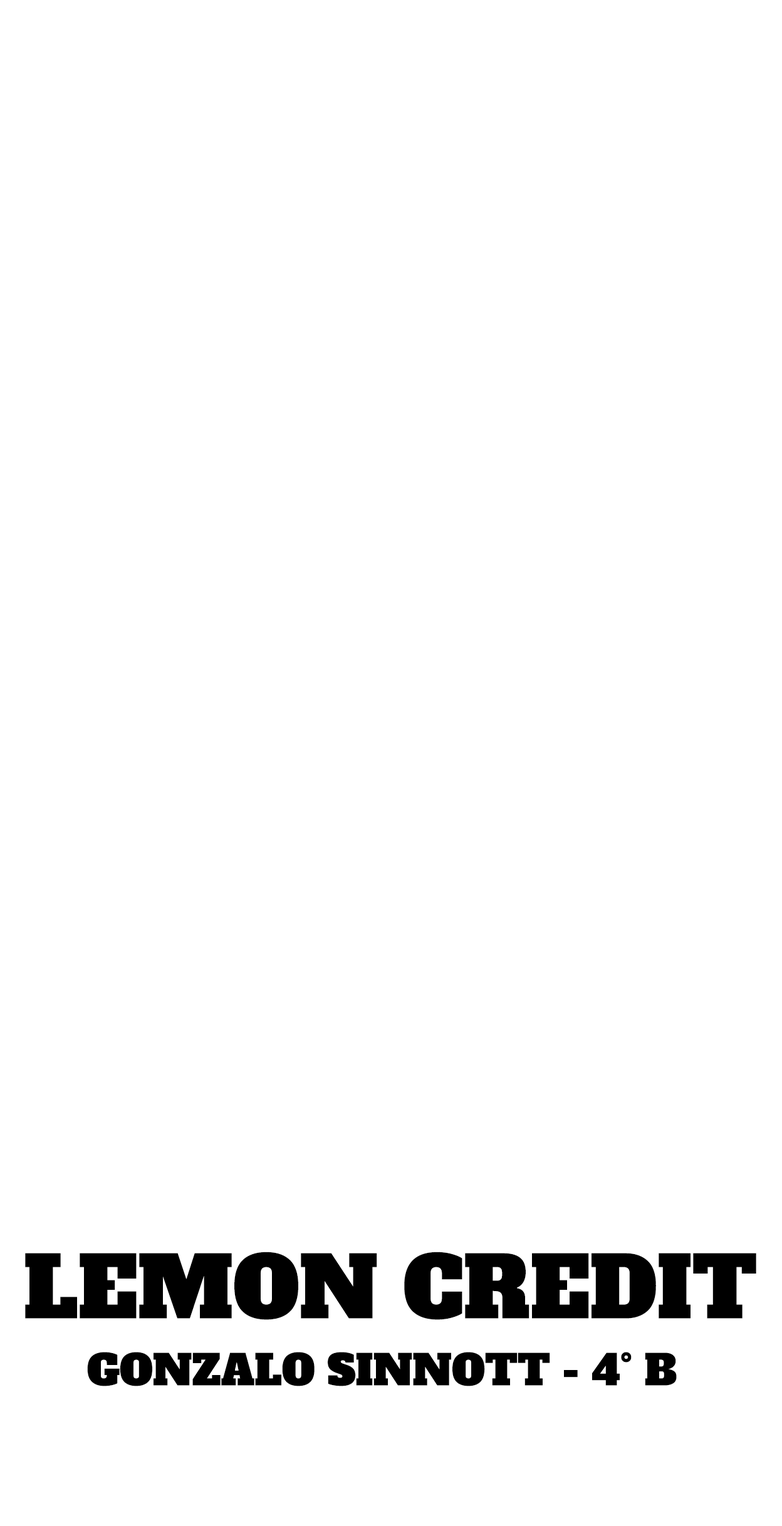
<style>
.page{position:relative;width:782px;height:1526px;background:#ffffff}
.page>*{position:absolute;margin:0}
.t1{font:83.5px "AlfaSlabOne-Regular";color:#000000}
.t2{font:41.8px "AlfaSlabOne-Regular";color:#000000}
</style>
<div class="page">
<p class="t1" style="left:25px;top:1251px;width:731px;height:69px">LEMON CREDIT</p>
<p class="t2" style="left:87px;top:1352px;width:589px;height:34px">GONZALO SINNOTT - 4° B</p>
</div>
